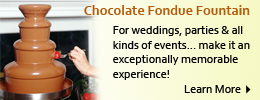
<style>
.page{position:relative;width:260px;height:100px}
.page>*{position:absolute;margin:0}
.t1{font:14px "Corbel-Bold";color:#b65c0d}
.t2{font:12px "Corbel";color:#000000}
</style>
<div class="page">
<p class="t1" style="left:84px;top:5px;width:166px;height:10px">Chocolate Fondue Fountain</p>
<p class="t2" style="left:113px;top:26px;width:137px;height:54px">For weddings, parties &amp; all kinds of events... make it an exceptionally memorable <br>experience!</p>
<p class="t2" style="left:184px;top:85px;width:57px;height:8px">Learn More</p>
</div>
